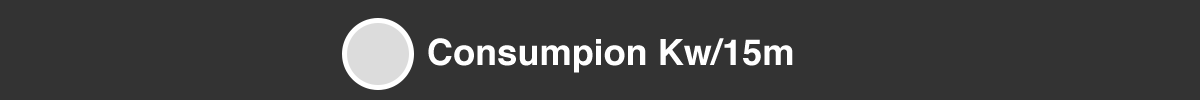
<style>
.page{position:relative;width:1200px;height:100px;background:#333333}
.page>*{position:absolute;margin:0}
.t1{font:36px "Helvetica-Bold";color:#ffffff}
</style>
<div class="page">
<p class="t1" style="left:428px;top:38px;width:365px;height:35px">Consumpion Kw/15m</p>
</div>
